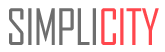
<style>
.page{position:relative;width:165px;height:52px;background:#ffffff}
.page>*{position:absolute;margin:0}
.t1{font:48px "AgencyFB-Reg";letter-spacing:-0.025em;color:#6e6e6e}
.t2{font:48px "AgencyFB-Reg";letter-spacing:-0.025em;color:#ff474d}
</style>
<div class="page">
<p class="t1" style="left:9px;top:8px;width:150px;height:37px">SIMPLI<span class="t2">CITY</span></p>
</div>
